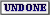
<style>
.page{position:relative;width:50px;height:15px;background:#d4d1d1}
.page>*{position:absolute;margin:0}
.t1{font:10px "TimesNewRomanPS-BoldMT"}
</style>
<div class="page">
<p class="t1" style="left:4px;top:4px;width:42px;height:7px">UNDONE</p>
</div>
